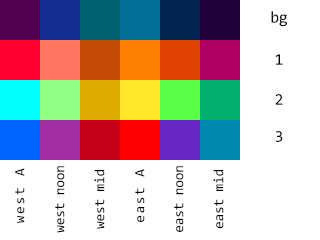
<style>
.page{position:relative;width:320px;height:240px;background:#ffffff}
.page>*{position:absolute;margin:0}
.t1{font:16.5px "Consolas";letter-spacing:-0.02em;color:#000000}
.t2{font:14.2px "Consolas";letter-spacing:0.12em;color:#000000}
.t3{font:14.2px "Consolas";letter-spacing:-0.02em;color:#000000}
.t4{font:14.2px "Consolas";letter-spacing:0.1em;color:#000000}
</style>
<div class="page">
<p class="t1" style="left:271px;top:11px;width:16px;height:16px">bg</p>
<p class="t1" style="left:275px;top:54px;width:8px;height:11px">1</p>
<p class="t1" style="left:275px;top:94px;width:8px;height:11px">2</p>
<p class="t1" style="left:275px;top:131px;width:8px;height:11px">3</p>
<p class="t2" style="left:15px;top:168px;width:10px;height:55px;rotate:-90deg">west A</p>
<p class="t3" style="left:55px;top:166px;width:10px;height:67px;rotate:-90deg">west noon</p>
<p class="t3" style="left:94px;top:170px;width:11px;height:59px;rotate:-90deg">west mid</p>
<p class="t4" style="left:135px;top:169px;width:10px;height:53px;rotate:-90deg">east A</p>
<p class="t3" style="left:174px;top:166px;width:10px;height:66px;rotate:-90deg">east noon</p>
<p class="t3" style="left:213px;top:170px;width:11px;height:59px;rotate:-90deg">east mid</p>
</div>
